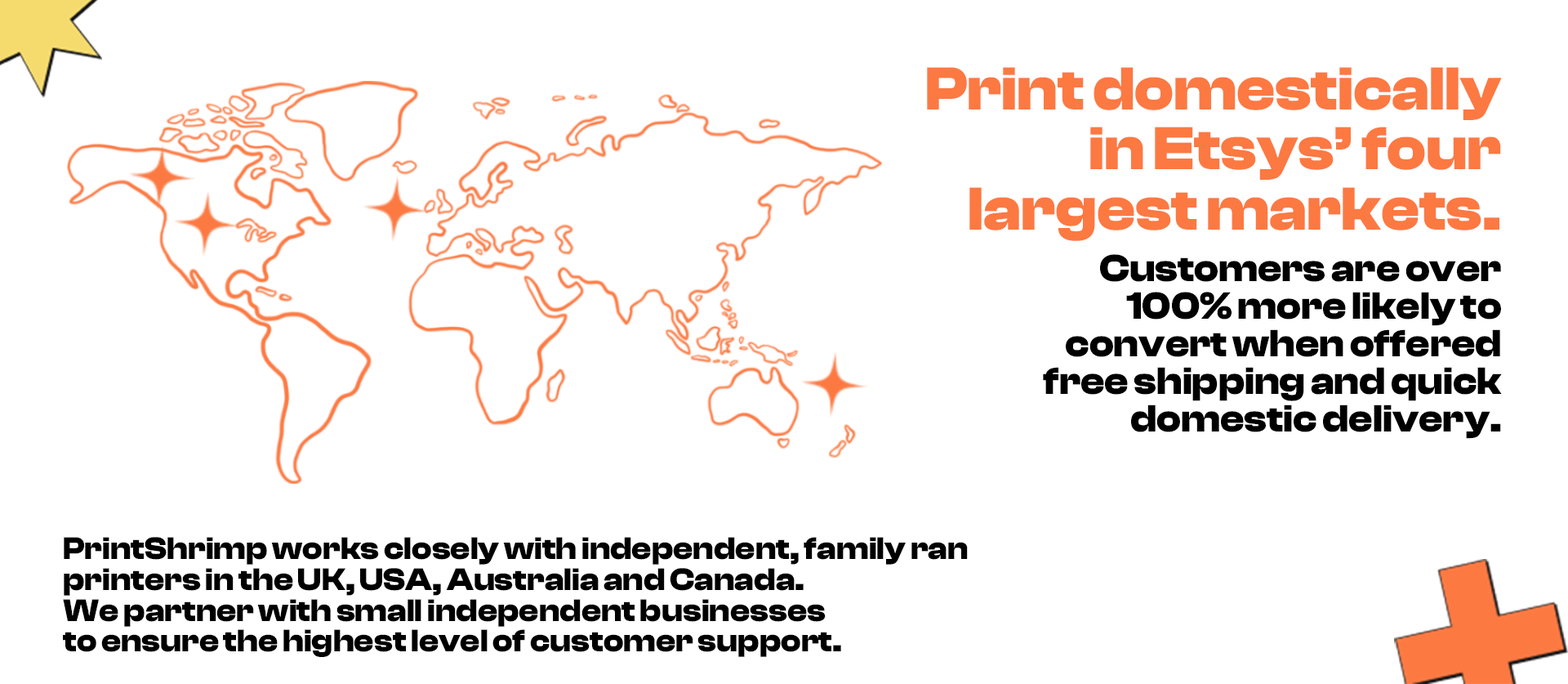
<style>
.page{position:relative;width:1568px;height:684px;background:#ffffff}
.page>*{position:absolute;margin:0}
.t1{font:62.8px/59.9px "false";color:#fc7942}
.t2{font:39.2px/37.4px "false";color:#000000}
.t3{font:32.3px/30.8px "false";color:#000000}
</style>
<div class="page">
<p class="t1" style="left:927px;top:67px;width:575px;height:174px;text-align:right">Print domestically<br>in Etsys’ four<br>largest markets.</p>
<p class="t2" style="left:1043px;top:254px;width:459px;height:185px;text-align:right">Customers are over<br>100% more likely to<br>convert when offered<br>free shipping and quick<br>domestic delivery.</p>
<p class="t3" style="left:63px;top:537px;width:905px;height:120px">PrintShrimp works closely with independent, family ran<br>printers in the UK, USA, Australia and Canada. <br>We partner with small independent businesses <br>to ensure the highest level of customer support.</p>
</div>
